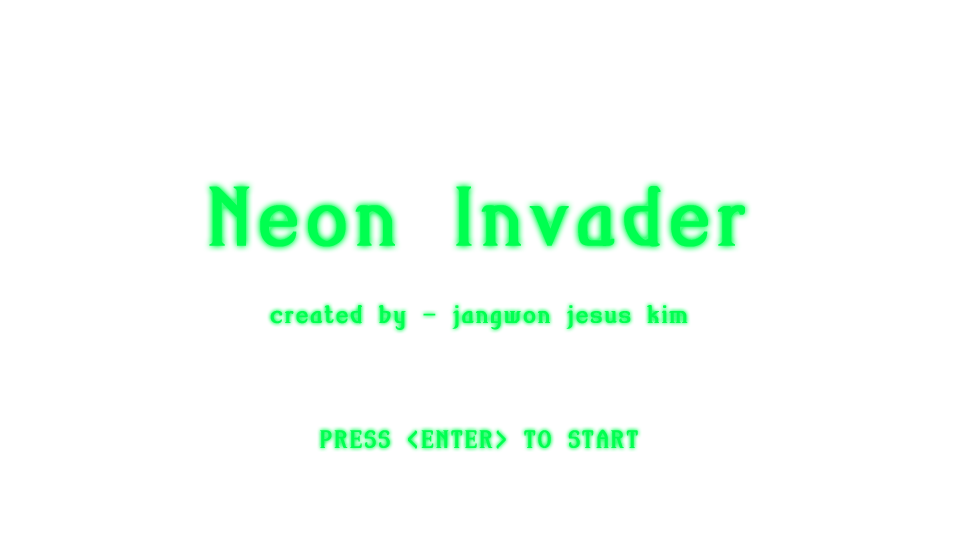
<style>
.page{position:relative;width:960px;height:540px;background:#ffffff}
.page>*{position:absolute;margin:0}
.t1{font:100px "AmiR-HM";letter-spacing:0.06em;color:#00ff50;font-weight:bold}
.t2{font:30px "AmiR-HM";letter-spacing:0.06em;color:#00ff50;font-weight:bold}
.t3{font:30px/72px "AmiR-HM";letter-spacing:0.06em;color:#00ff50;font-weight:bold}
</style>
<div class="page">
<p class="t1" style="left:209px;top:186px;width:536px;height:61px">Neon Invader</p>
<p class="t2" style="left:270px;top:305px;width:418px;height:144px;text-align:center">created by - jangwon jesus kim<br><span class="t3"><br>PRESS &lt;ENTER&gt; TO ST</span>ART</p>
</div>
